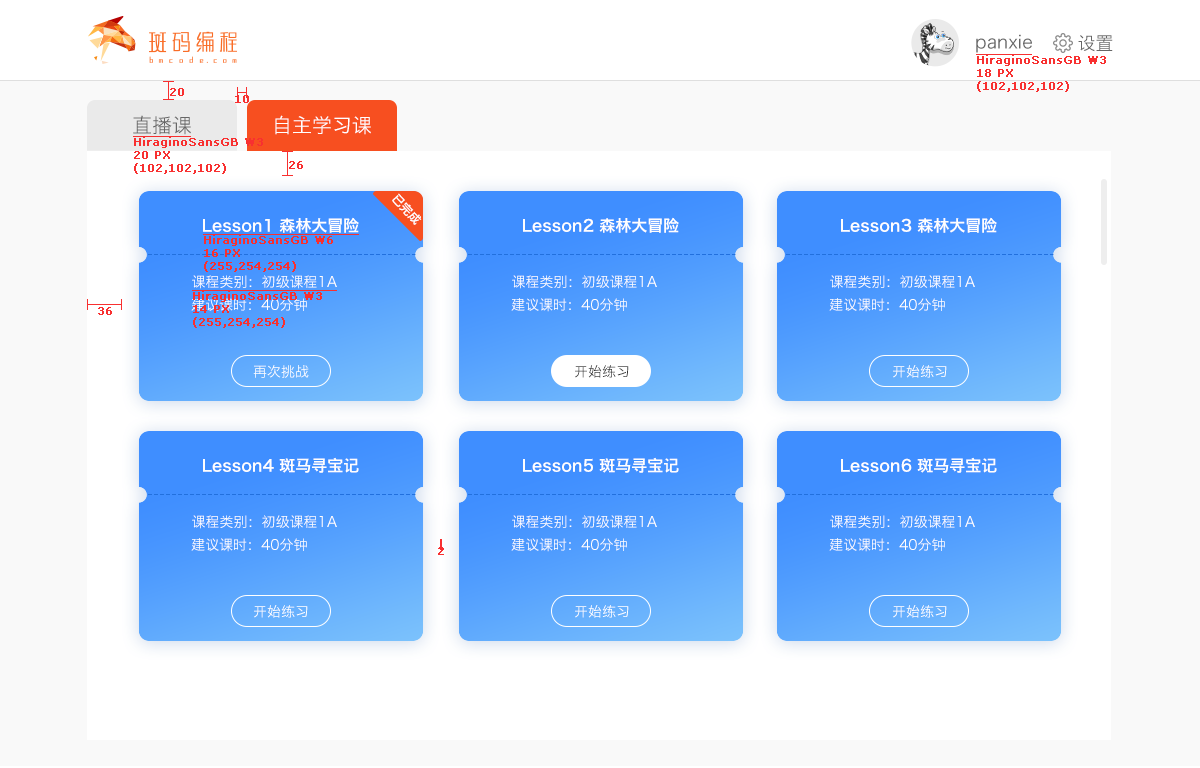
<style>
.page{position:relative;width:1200px;height:768px;background:#ffffff}
.page>*{position:absolute;margin:0}
.t1{font:18px "HiraginoSansGB-W3";color:#666666}
.t2{font:11px "Verdana";color:#f83030;font-weight:bold}
.t3{font:20px "HiraginoSansGB-W3";color:#666666}
.t4{font:20px "HiraginoSansGB-W3";color:#ffffff}
.t5{font:12px "HiraginoSansGB-W6";color:#ffffff}
.t6{font:16px "HiraginoSansGB-W6";color:#fffefe}
.t7{font:14px "HiraginoSansGB-W3";color:#fffefe}
.t8{font:14px "HiraginoSansGB-W3";color:#ffffff}
.t9{font:14px "HiraginoSansGB-W3";color:#333333}
</style>
<div class="page">
<p class="t1" style="left:976px;top:34px;width:56px;height:19px">panxie</p>
<p class="t1" style="left:1078px;top:35px;width:35px;height:17px">设置</p>
<p class="t2" style="left:977px;top:55px;width:129px;height:37px">HiraginoSansGB W3<br>18 PX<br>(102,102,102)</p>
<p class="t2" style="left:170px;top:88px;width:14px;height:8px">20</p>
<p class="t2" style="left:235px;top:95px;width:14px;height:8px">10</p>
<p class="t3" style="left:133px;top:115px;width:58px;height:20px">直播课</p>
<p class="t4" style="left:275px;top:115px;width:96px;height:20px">自主学习课</p>
<p class="t2" style="left:134px;top:137px;width:129px;height:37px">HiraginoSansGB W3<br>20 PX<br>(102,102,102)</p>
<p class="t2" style="left:289px;top:161px;width:14px;height:8px">26</p>
<p class="t5" style="left:392px;top:193px;width:30px;height:32px;rotate:47deg">已完成</p>
<p class="t6" style="left:203px;top:217px;width:156px;height:16px">Lesson1 森林大冒险</p>
<p class="t6" style="left:523px;top:217px;width:156px;height:16px">Lesson2 森林大冒险</p>
<p class="t6" style="left:841px;top:217px;width:156px;height:16px">Lesson3 森林大冒险</p>
<p class="t2" style="left:204px;top:235px;width:129px;height:37px">HiraginoSansGB W6<br>16 PX<br>(255,254,254)</p>
<p class="t7" style="left:192px;top:275px;width:145px;height:14px">课程类别：初级课程1A</p>
<p class="t7" style="left:512px;top:275px;width:145px;height:14px">课程类别：初级课程1A</p>
<p class="t7" style="left:830px;top:275px;width:145px;height:14px">课程类别：初级课程1A</p>
<p class="t2" style="left:193px;top:291px;width:129px;height:37px">HiraginoSansGB W3<br>14 PX<br>(255,254,254)</p>
<p class="t7" style="left:191px;top:298px;width:116px;height:14px">建议课时：40分钟</p>
<p class="t7" style="left:511px;top:298px;width:116px;height:14px">建议课时：40分钟</p>
<p class="t7" style="left:829px;top:298px;width:116px;height:14px">建议课时：40分钟</p>
<p class="t2" style="left:98px;top:307px;width:14px;height:8px">36</p>
<p class="t8" style="left:253px;top:365px;width:56px;height:13px">再次挑战</p>
<p class="t9" style="left:575px;top:365px;width:54px;height:13px">开始练习</p>
<p class="t8" style="left:893px;top:365px;width:54px;height:13px">开始练习</p>
<p class="t6" style="left:203px;top:457px;width:156px;height:16px">Lesson4 斑马寻宝记</p>
<p class="t6" style="left:523px;top:457px;width:156px;height:16px">Lesson5 斑马寻宝记</p>
<p class="t6" style="left:841px;top:457px;width:156px;height:16px">Lesson6 斑马寻宝记</p>
<p class="t7" style="left:192px;top:515px;width:145px;height:14px">课程类别：初级课程1A</p>
<p class="t7" style="left:512px;top:515px;width:145px;height:14px">课程类别：初级课程1A</p>
<p class="t7" style="left:830px;top:515px;width:145px;height:14px">课程类别：初级课程1A</p>
<p class="t7" style="left:191px;top:538px;width:116px;height:14px">建议课时：40分钟</p>
<p class="t7" style="left:511px;top:538px;width:116px;height:14px">建议课时：40分钟</p>
<p class="t7" style="left:829px;top:538px;width:116px;height:14px">建议课时：40分钟</p>
<p class="t2" style="left:438px;top:547px;width:6px;height:8px">2</p>
<p class="t8" style="left:254px;top:605px;width:54px;height:13px">开始练习</p>
<p class="t8" style="left:575px;top:605px;width:54px;height:13px">开始练习</p>
<p class="t8" style="left:893px;top:605px;width:54px;height:13px">开始练习</p>
</div>
